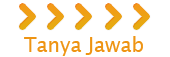
<style>
.page{position:relative;width:170px;height:57px;background:#ffffff}
.page>*{position:absolute;margin:0}
.t1{font:20px "LucidaSans";color:#ee9413}
</style>
<div class="page">
<p class="t1" style="left:24px;top:36px;width:119px;height:20px">Tanya Jawab</p>
</div>
